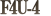
<style>
.page{position:relative;width:51px;height:16px;background:#ffffff}
.page>*{position:absolute;margin:0}
.t1{font:18px "RyuminPro-ExBold";letter-spacing:-0.08em;color:#4a3f32;font-weight:bold;scale:0.9 1}
</style>
<div class="page">
<p class="t1" style="left:0px;top:0px;width:40px;height:15px">F4U-4</p>
</div>
